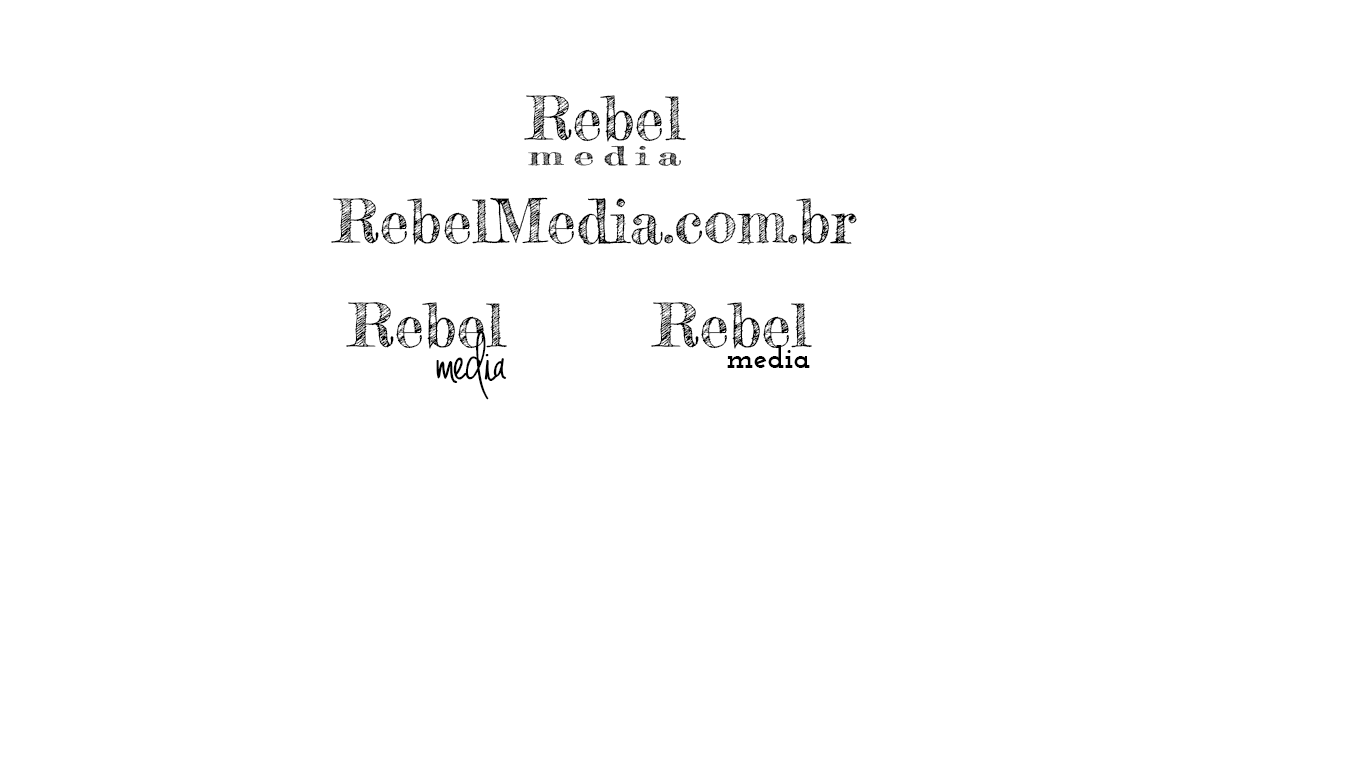
<style>
.page{position:relative;width:1366px;height:768px;background:#ffffff}
.page>*{position:absolute;margin:0}
.t1{font:60px/25px "FrederickatheGreat-Regular";color:#000000}
.t2{font:25.5px/25px "FrederickatheGreat-Regular";letter-spacing:0.2em;color:#000000;scale:1.67 1}
.t3{font:60px "FrederickatheGreat-Regular";color:#000000}
.t4{font:60px/32px "FrederickatheGreat-Regular";color:#000000}
.t5{font:60px/32px "JenniferLynne-Bold";color:#000000}
.t6{font:31px/21px "JosefinSlab-Bold";color:#000000}
</style>
<div class="page">
<p class="t1" style="left:524px;top:95px;width:162px;height:71px;text-align:center">Rebel<br><span class="t2">media</span></p>
<p class="t3" style="left:331px;top:197px;width:526px;height:48px">RebelMedia.com.br</p>
<p class="t4" style="left:346px;top:302px;width:161px;height:98px;text-align:right">Rebel<br><span class="t5">media</span></p>
<p class="t4" style="left:651px;top:302px;width:161px;height:66px;text-align:right">Rebel<br><span class="t6">media</span></p>
</div>
